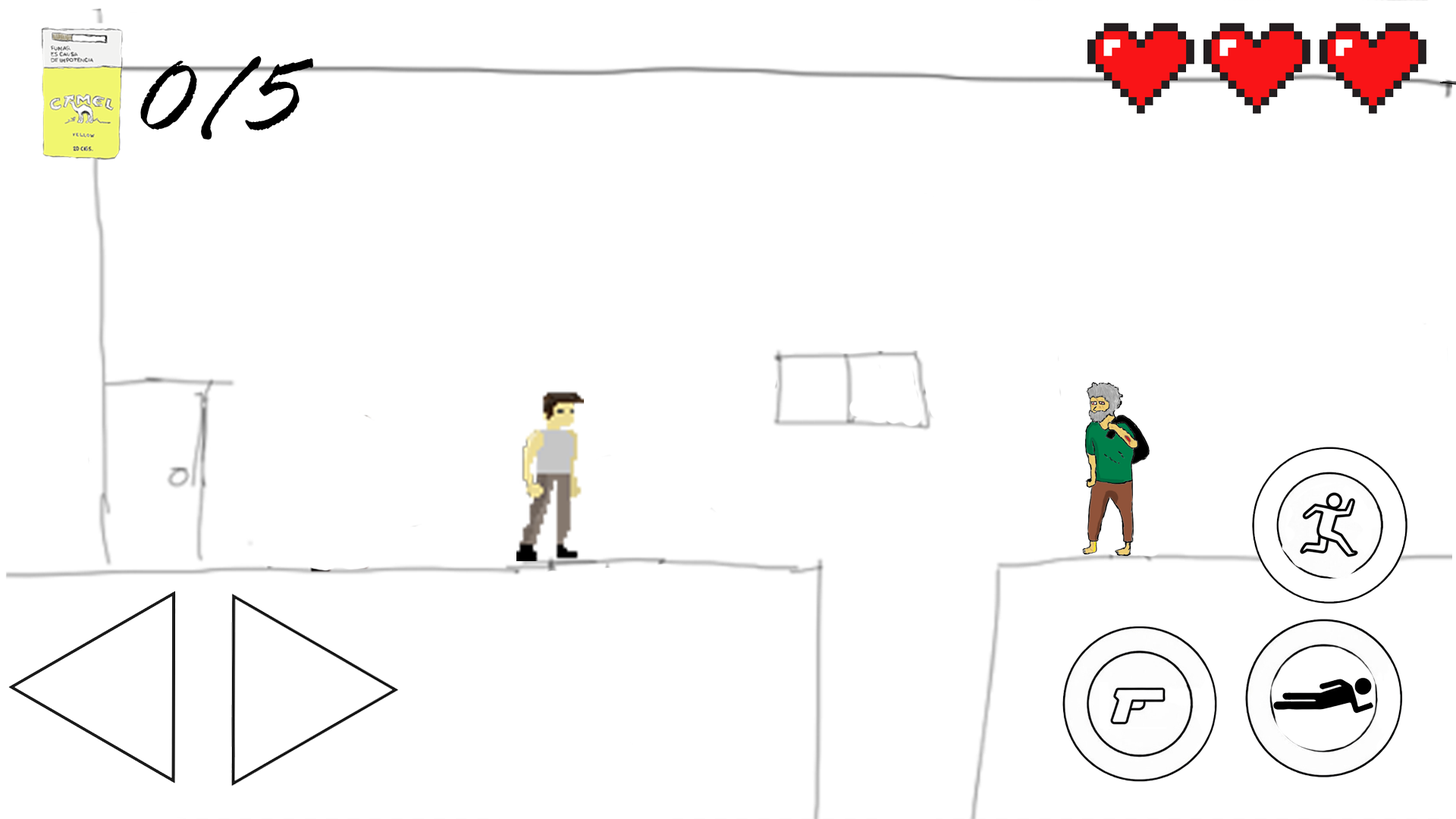
<style>
.page{position:relative;width:1456px;height:819px;background:#ffffff}
.page>*{position:absolute;margin:0}
.t1{font:118.2px "RageItalic";color:#000000}
</style>
<div class="page">
<p class="t1" style="left:140px;top:56px;width:174px;height:84px">0/5</p>
</div>
